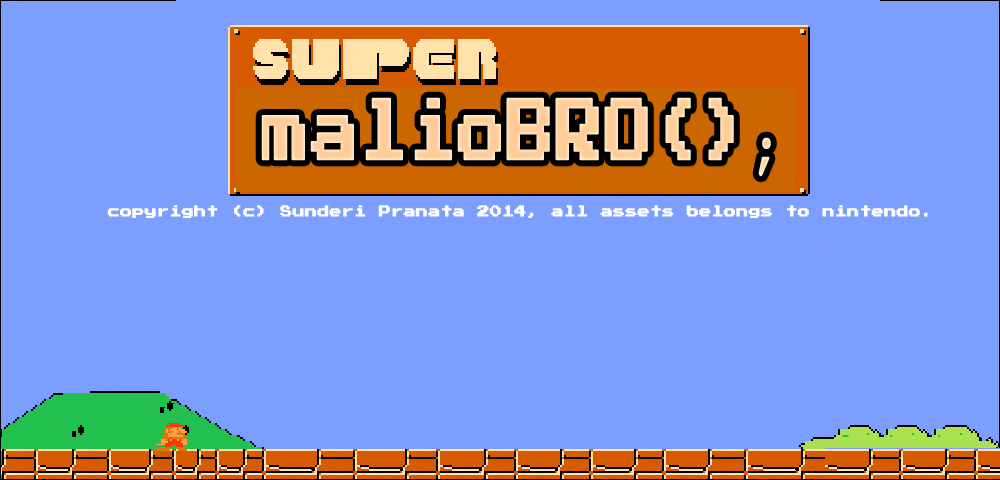
<style>
.page{position:relative;width:1000px;height:480px;background:#7c9eff}
.page>*{position:absolute;margin:0}
.t1{font:69px "PressStart2P";color:#ffcc99;font-weight:bold;scale:0.69 1}
.t2{font:69px "CourierNewPSMT";color:#ffcc99;font-weight:bold;scale:0.69 1}
.t3{font:12px "PressStart2P";color:#ffffff;font-weight:bold}
</style>
<div class="page">
<p class="t1" style="left:261px;top:97px;width:510px;height:80px">malioBRO()<span class="t2">;</span></p>
<p class="t3" style="left:107px;top:205px;width:821px;height:13px">copyright (c) Sunderi Pranata 2014, all assets belongs to nintendo.</p>
</div>
